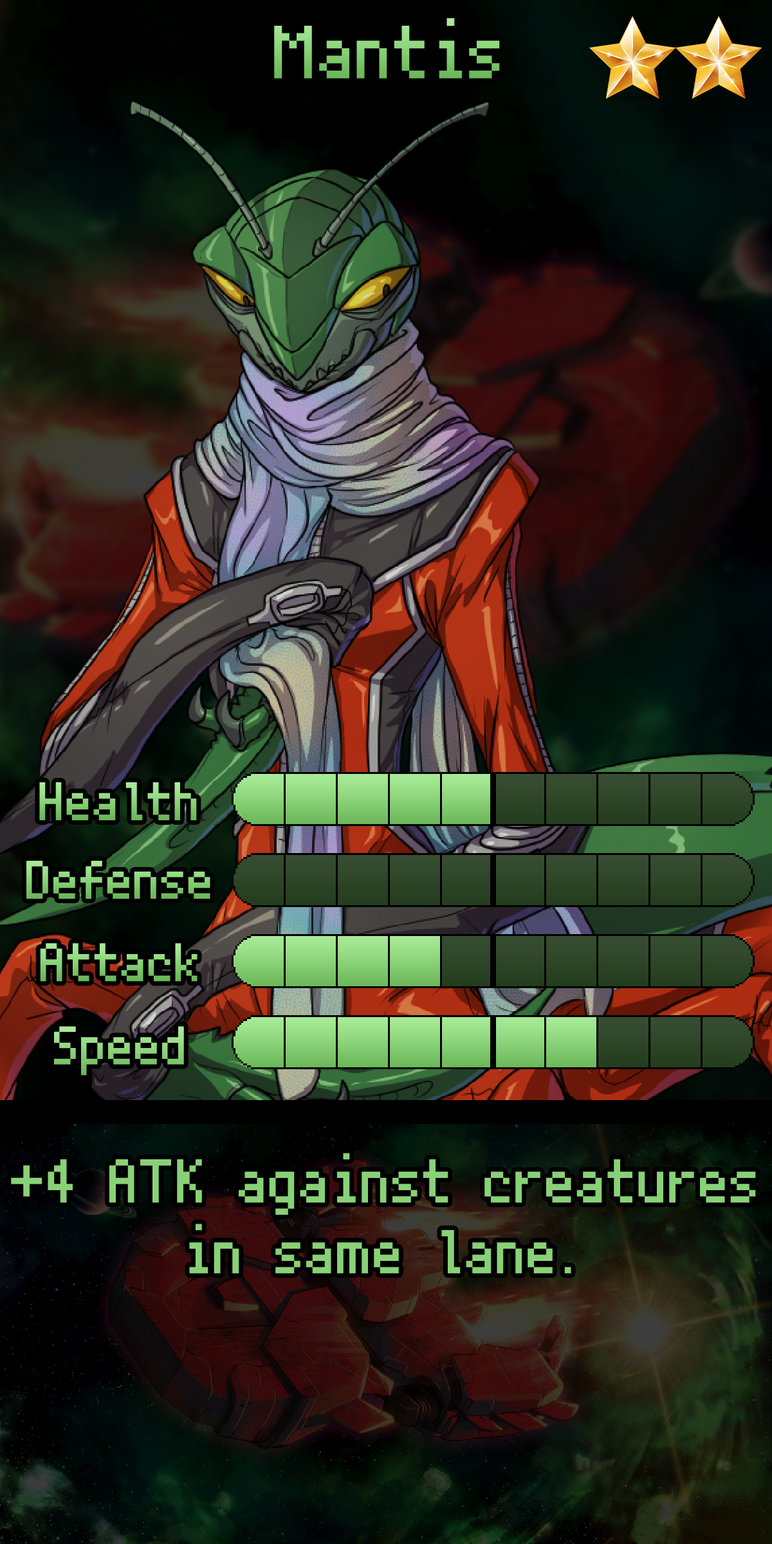
<style>
.page{position:relative;width:772px;height:1544px}
.page>*{position:absolute;margin:0}
.t1{font:128.7px "PixelMplus10-Regular";color:#82cb70}
.t2{font:92.7px "PixelMplus10-Regular"}
.t3{font:92.7px "PixelMplus10-Regular";color:#8cd47b}
.t4{font:105.5px "PixelMplus10-Regular";color:#89d177}
</style>
<div class="page">
<p class="t1" style="left:274px;top:18px;width:226px;height:61px">Mantis</p>
<p class="t2" style="left:39px;top:782px;width:158px;height:38px">Health</p>
<p class="t2" style="left:26px;top:861px;width:184px;height:38px">Defense</p>
<p class="t2" style="left:40px;top:943px;width:158px;height:39px">Attack</p>
<p class="t3" style="left:54px;top:1026px;width:130px;height:50px">Speed</p>
<p class="t4" style="left:11px;top:1153px;width:745px;height:121px">+4 ATK against creatures in same lane.</p>
</div>
